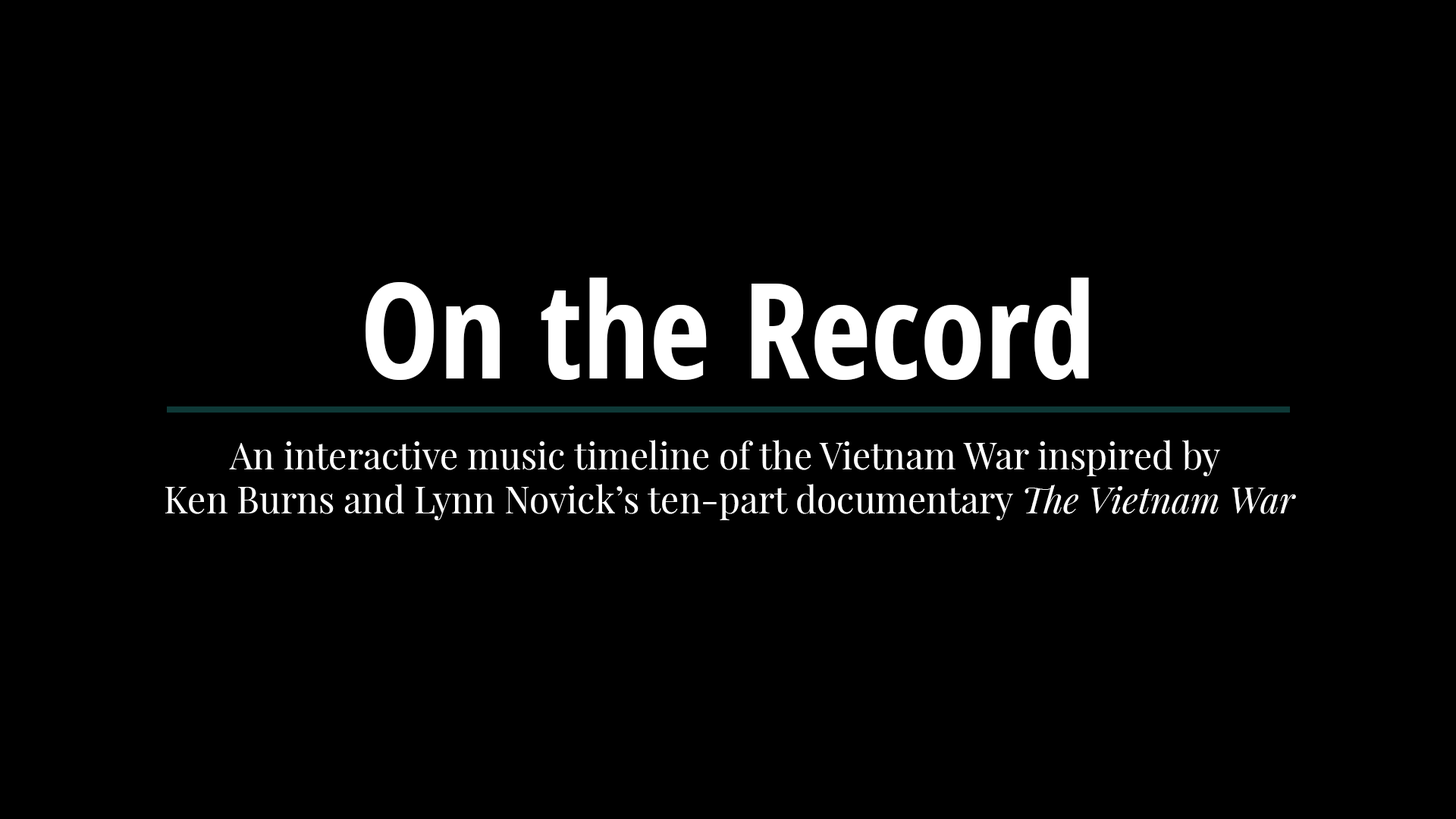
<style>
.page{position:relative;width:1456px;height:819px;background:#000000}
.page>*{position:absolute;margin:0}
.t1{font:132.7px "OpenSansCondensed-Bold";color:#ffffff}
.t2{font:36.4px "PlayfairDisplay-Regular";color:#ffffff}
.t3{font:36.4px "PlayfairDisplay-Italic";color:#ffffff}
</style>
<div class="page">
<p class="t1" style="left:366px;top:278px;width:723px;height:102px">On the Record</p>
<p class="t2" style="left:165px;top:440px;width:1131px;height:80px;text-align:center">An interactive music timeline of the Vietnam War inspired by <br>Ken Burns and Lynn Novick’s ten-part documentary <span class="t3">The Vietnam War</span></p>
</div>
